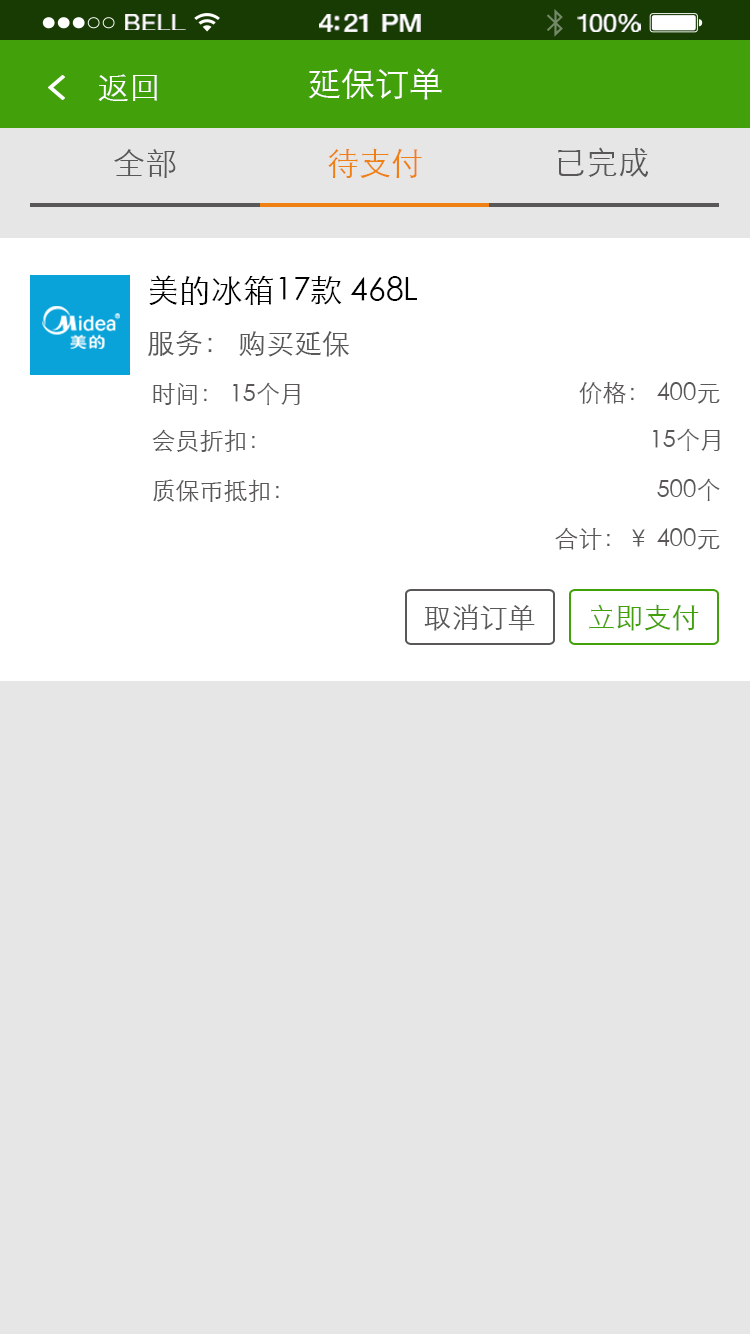
<style>
.page{position:relative;width:750px;height:1334px;background:#e6e6e6}
.page>*{position:absolute;margin:0}
.t1{font:23.3px "HelveticaNeue";letter-spacing:0.02em;color:#ffffff;scale:1.06 1}
.t2{font:25.3px "HelveticaNeue-Medium";letter-spacing:-0.02em;color:#ffffff;scale:1.06 1}
.t3{font:24.3px "HelveticaNeue";letter-spacing:-0.02em;color:#ffffff;scale:1.06 1}
.t4{font:32px "STXihei";color:#ffffff}
.t5{font:34px "STXihei";color:#ffffff}
.t6{font:32px "STXihei";color:#595757}
.t7{font:32px "STXihei";color:#ef8013}
.t8{font:32px/56px "STXihei";color:#000000}
.t9{font:28px/56px "STXihei";color:#595757}
.t10{font:24px "STXihei";color:#595757}
.t11{font:28px "STXihei";color:#595757}
.t12{font:28px "STXihei";color:#42a00a}
</style>
<div class="page">
<p class="t1" style="left:125px;top:14px;width:61px;height:16px">BELL</p>
<p class="t2" style="left:319px;top:14px;width:102px;height:18px">4:21 PM</p>
<p class="t3" style="left:577px;top:14px;width:64px;height:18px">100%</p>
<p class="t4" style="left:98px;top:74px;width:59px;height:27px">返回</p>
<p class="t5" style="left:308px;top:68px;width:134px;height:32px">延保订单</p>
<p class="t6" style="left:114px;top:149px;width:62px;height:29px">全部</p>
<p class="t7" style="left:328px;top:148px;width:94px;height:30px">待支付</p>
<p class="t6" style="left:558px;top:147px;width:91px;height:30px">已完成</p>
<p class="t8" style="left:147px;top:275px;width:270px;height:82px">美的冰箱17款 468L <br><span class="t9">服务： 购买延保</span></p>
<p class="t10" style="left:153px;top:382px;width:147px;height:24px">时间： 15个月</p>
<p class="t10" style="left:579px;top:382px;width:141px;height:22px">价格： 400元</p>
<p class="t10" style="left:152px;top:429px;width:103px;height:23px">会员折扣：</p>
<p class="t10" style="left:653px;top:428px;width:67px;height:24px">15个月</p>
<p class="t10" style="left:153px;top:479px;width:126px;height:23px">质保币抵扣：</p>
<p class="t10" style="left:657px;top:478px;width:63px;height:24px">500个</p>
<p class="t10" style="left:555px;top:527px;width:165px;height:23px">合计：￥ 400元</p>
<p class="t11" style="left:424px;top:604px;width:111px;height:27px">取消订单</p>
<p class="t12" style="left:589px;top:604px;width:110px;height:27px">立即支付</p>
</div>
